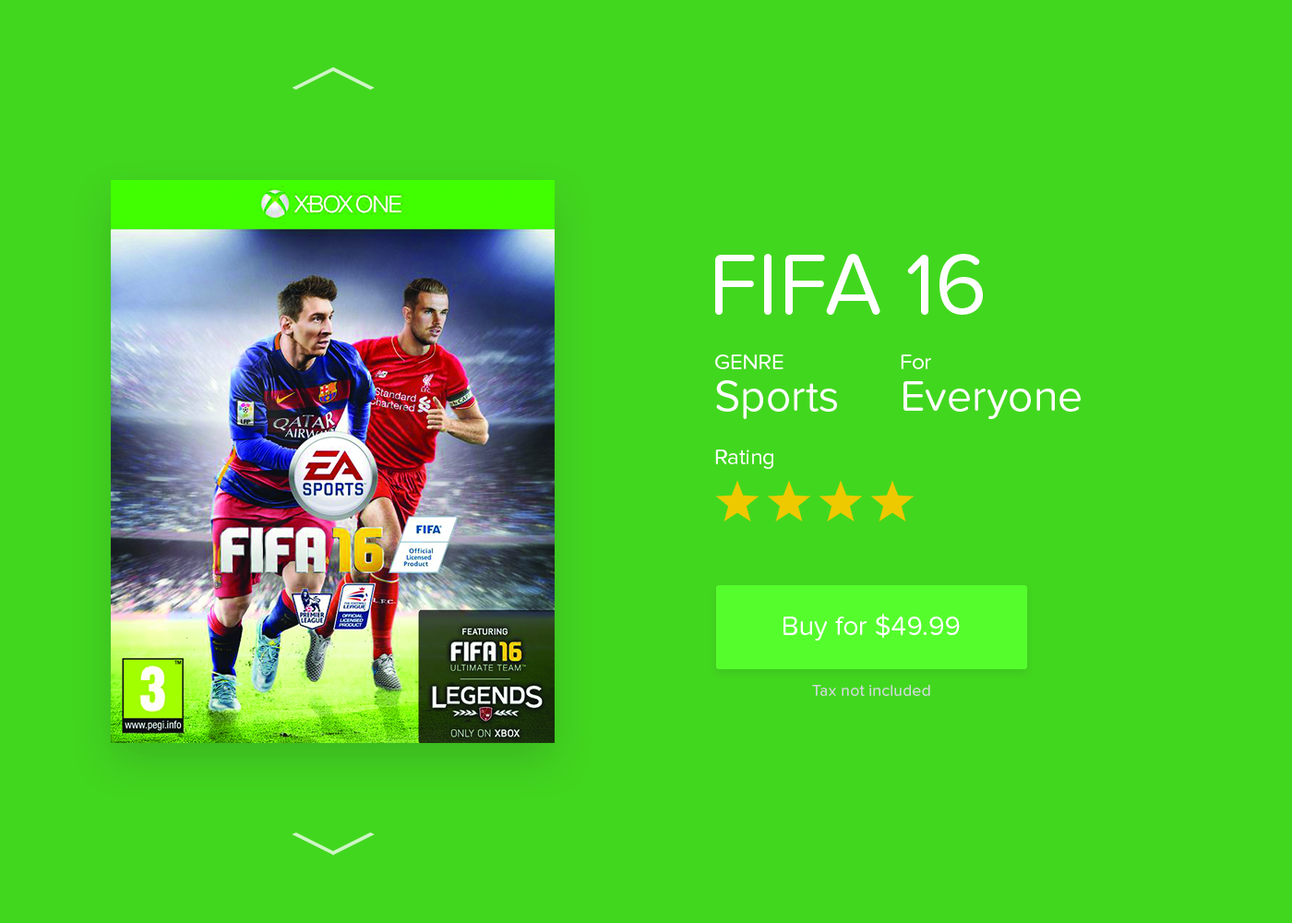
<style>
.page{position:relative;width:1292px;height:923px;background:#42d71f}
.page>*{position:absolute;margin:0}
.t1{font:88.6px "ProximaNovaSoft-Regular";color:#ffffff}
.t2{font:22.1px "ProximaNovaSoft-Regular";color:#ffffff}
.t3{font:44.3px "ProximaNovaSoft-Regular";color:#ffffff}
.t4{font:27.7px "ProximaNovaSoft-Regular";color:#ffffff}
.t5{font:16.6px "ProximaNovaSoft-Regular";color:#ced9d7}
</style>
<div class="page">
<p class="t1" style="left:715px;top:254px;width:268px;height:61px">FIFA 16</p>
<p class="t2" style="left:715px;top:354px;width:69px;height:15px">GENRE</p>
<p class="t2" style="left:901px;top:354px;width:30px;height:15px">For</p>
<p class="t3" style="left:716px;top:380px;width:121px;height:39px">Sports</p>
<p class="t3" style="left:904px;top:381px;width:177px;height:38px">Everyone</p>
<p class="t2" style="left:715px;top:449px;width:58px;height:20px">Rating</p>
<p class="t4" style="left:784px;top:614px;width:176px;height:26px">Buy for $49.99</p>
<p class="t5" style="left:812px;top:684px;width:118px;height:12px">Tax not included</p>
</div>
